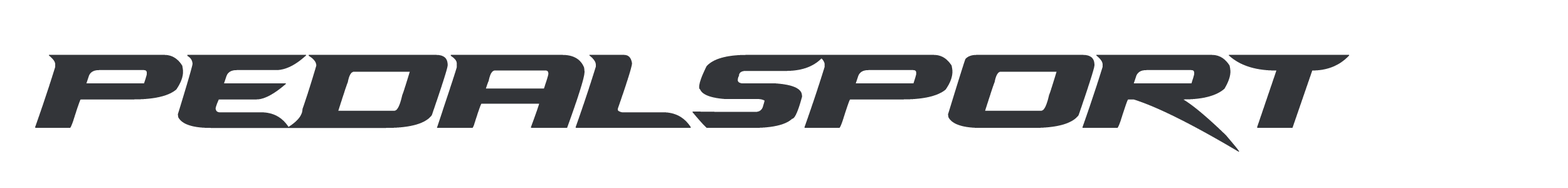
<style>
.page{position:relative;width:1568px;height:188px;background:#ffffff}
.page>*{position:absolute;margin:0}
.t1{font:202.8px "NHLDucks";color:#333539}
</style>
<div class="page">
<p class="t1" style="left:35px;top:55px;width:1314px;height:97px">Pedalsport</p>
</div>
